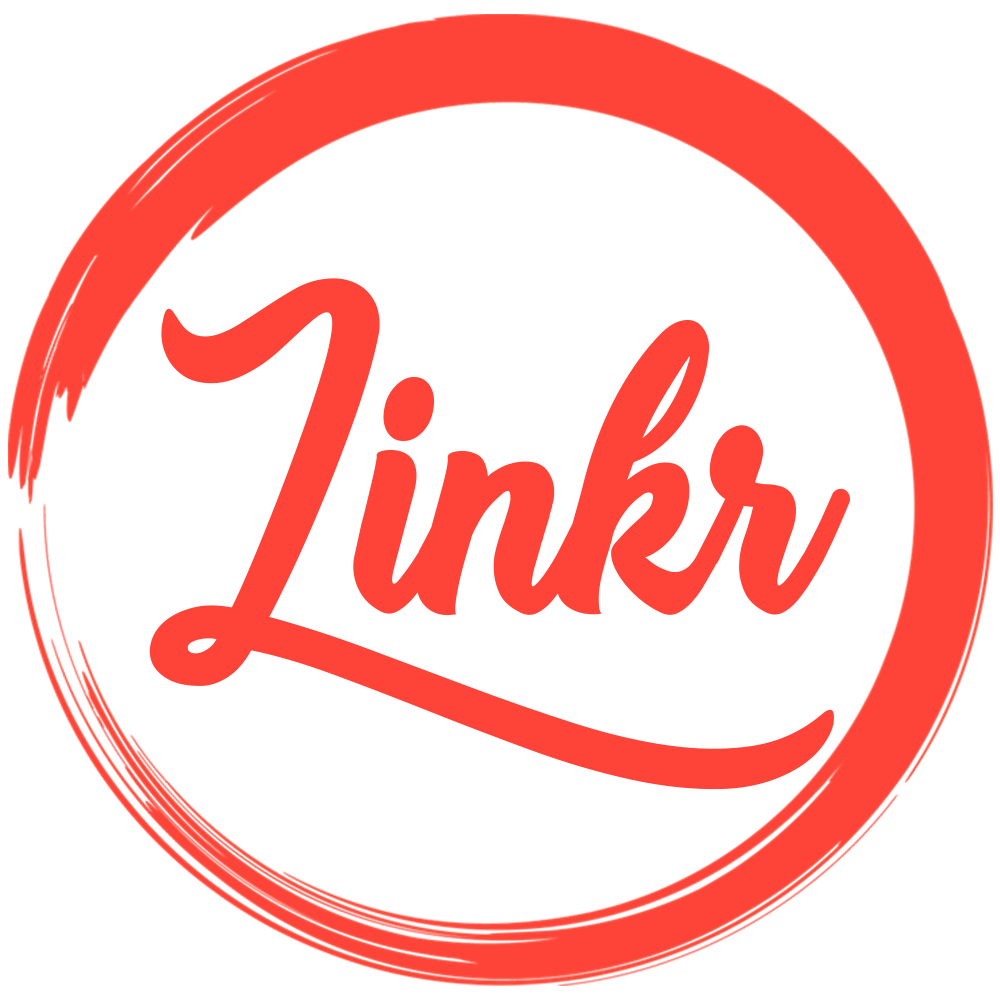
<style>
.page{position:relative;width:1000px;height:1000px;background:#ffffff}
.page>*{position:absolute;margin:0}
.t1{font:451.2px "SweetSensationsPersonalUse";color:#fe4439}
</style>
<div class="page">
<p class="t1" style="left:149px;top:278px;width:701px;height:512px">Linkr</p>
</div>
